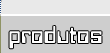
<style>
.page{position:relative;width:110px;height:53px;background:#cecece}
.page>*{position:absolute;margin:0}
.t1{font:24px "OrbitBbyBT-Regular";color:#ffffff}
</style>
<div class="page">
<p class="t1" style="left:9px;top:26px;width:93px;height:23px">produtos</p>
</div>
